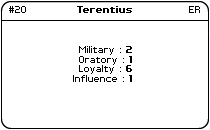
<style>
.page{position:relative;width:210px;height:130px;background:#ffffff}
.page>*{position:absolute;margin:0}
.t1{font:8px "PFTempestaSeven";color:#000000}
.t2{font:8px "PFTempestaSeven-Bold";color:#000000}
</style>
<div class="page">
<p class="t1" style="left:9px;top:6px;width:17px;height:7px">#20</p>
<p class="t2" style="left:77px;top:6px;width:55px;height:7px">Terentius</p>
<p class="t1" style="left:189px;top:6px;width:11px;height:7px">ER</p>
<p class="t1" style="left:73px;top:46px;width:59px;height:36px;text-align:right">Military : <span class="t2">2<br></span>Oratory : <span class="t2">1<br></span>Loyalty : <span class="t2">6<br></span>Influence : <span class="t2">1</span></p>
</div>
